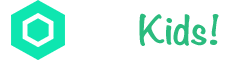
<style>
.page{position:relative;width:230px;height:60px;background:#ffffff}
.page>*{position:absolute;margin:0}
.t1{font:36px "Noteworthy-Bold";color:#2bbb7e}
</style>
<div class="page">
<p class="t1" style="left:139px;top:13px;width:80px;height:33px">Kids!</p>
</div>
